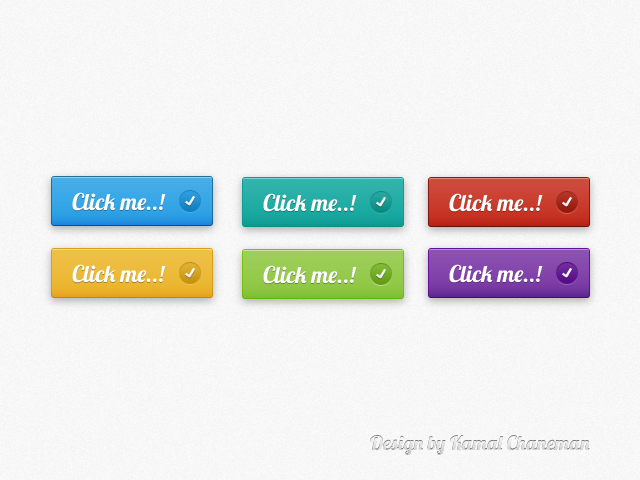
<style>
.page{position:relative;width:640px;height:480px}
.page>*{position:absolute;margin:0}
.t1{font:23px "Lobster";color:#ffffff}
.t2{font:20px "Lobster";color:#dcdcdc}
</style>
<div class="page">
<p class="t1" style="left:72px;top:192px;width:94px;height:19px">Click me..!</p>
<p class="t1" style="left:263px;top:193px;width:94px;height:19px">Click me..!</p>
<p class="t1" style="left:449px;top:193px;width:94px;height:19px">Click me..!</p>
<p class="t1" style="left:72px;top:264px;width:94px;height:19px">Click me..!</p>
<p class="t1" style="left:263px;top:265px;width:94px;height:19px">Click me..!</p>
<p class="t1" style="left:449px;top:264px;width:94px;height:19px">Click me..!</p>
<p class="t2" style="left:370px;top:435px;width:220px;height:20px">Design by Kamal Chaneman</p>
</div>
